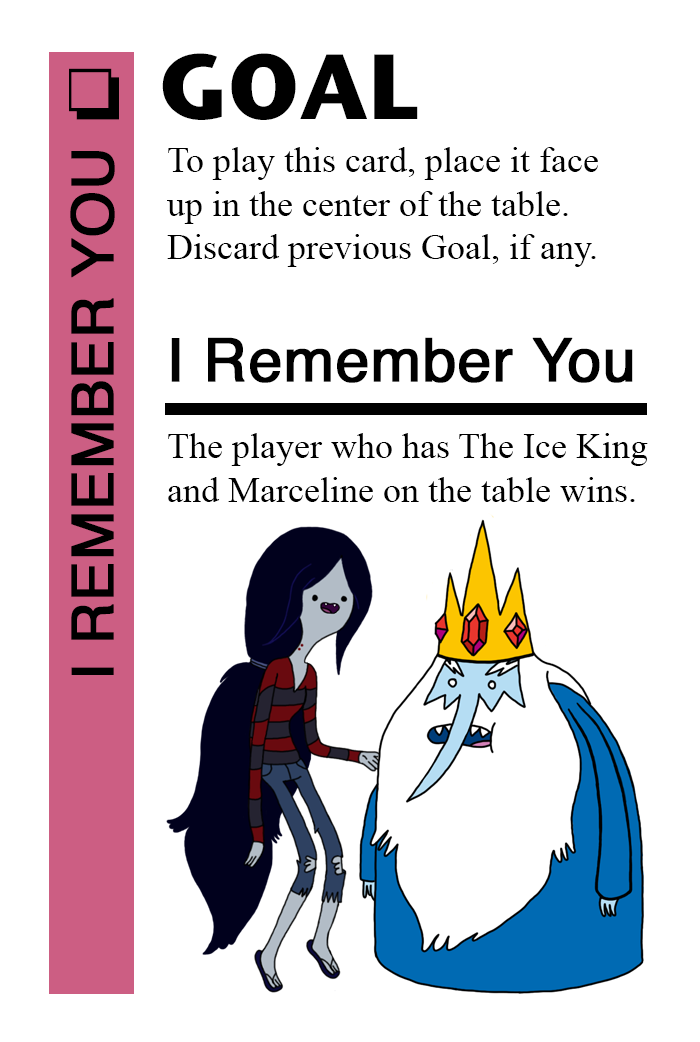
<style>
.page{position:relative;width:700px;height:1042px;background:#ffffff}
.page>*{position:absolute;margin:0}
.t1{font:92px "StoneSansITC-Bold";color:#000000}
.t2{font:72px "MS-Gothic";color:#000000}
.t3{font:36px "TimesNewRomanPSMT";color:#000000}
.t4{font:58px "Helvetica";color:#000000;font-weight:bold}
.t5{font:60px "Helvetica";color:#000000;font-weight:bold}
</style>
<div class="page">
<p class="t1" style="left:162px;top:53px;width:256px;height:67px">GOAL</p>
<p class="t2" style="left:69px;top:68px;width:50px;height:52px">❏</p>
<p class="t3" style="left:167px;top:147px;width:431px;height:120px">To play this card, place it face<br>up in the center of the table.<br>Discard previous Goal, if any.</p>
<p class="t4" style="left:70px;top:151px;width:45px;height:524px;rotate:-90deg">I REMEMBER YOU</p>
<p class="t5" style="left:171px;top:337px;width:462px;height:46px">I Remember You</p>
<p class="t3" style="left:168px;top:433px;width:480px;height:69px">The player who has The Ice King<br>and Marceline on the table wins.</p>
</div>
